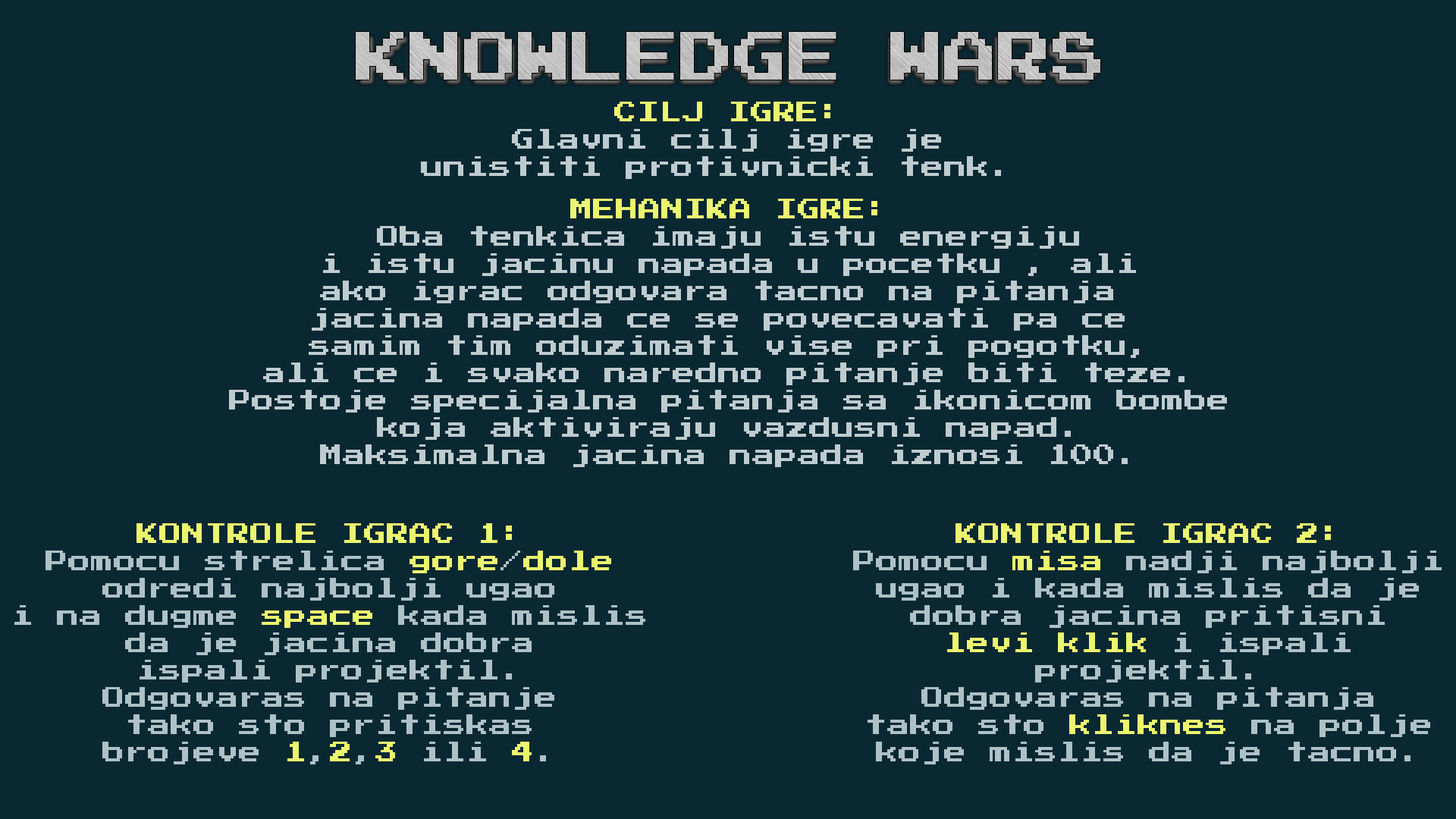
<style>
.page{position:relative;width:1456px;height:819px;background:#0a2832}
.page>*{position:absolute;margin:0}
.t1{font:22.7px "PressStart2P-Regular";color:#beccd0}
.t2{font:22.7px "PressStart2P-Regular";color:#ebf66f}
.t3{font:22.7px "PressStart2P-Regular";color:#adc1c7}
</style>
<div class="page">
<p class="t1" style="left:421px;top:102px;width:580px;height:77px;text-align:center"><span class="t2">CILJ IGRE:<br></span>Glavni cilj igre je<br>unistiti protivnicki tenk.</p>
<p class="t1" style="left:229px;top:199px;width:998px;height:268px;text-align:center"><span class="t2">MEHANIKA IGRE:<br></span>Oba tenkica imaju istu energiju<br>i istu jacinu napada u pocetku , ali<br>ako igrac odgovara tacno na pitanja <br>jacina napada ce se povecavati pa ce <br>samim tim oduzimati vise pri pogotku,<br>ali ce i svako naredno pitanje biti teze.<br>Postoje specijalna pitanja sa ikonicom bombe<br>koja aktiviraju vazdusni napad.<br>Maksimalna jacina napada iznosi 100.</p>
<p class="t3" style="left:14px;top:523px;width:631px;height:241px;text-align:center"><span class="t2">KONTROLE IGRAC 1:<br></span>Pomocu strelica <span class="t2">gore</span>/<span class="t2">dole<br></span>odredi najbolji ugao<br>i na dugme <span class="t2">space</span> kada mislis<br>da je jacina dobra<br>ispali projektil.<br>Odgovaras na pitanje<br>tako sto pritiskas<br>brojeve <span class="t2">1</span>,<span class="t2">2</span>,<span class="t2">3</span> ili <span class="t2">4</span>.</p>
<p class="t3" style="left:853px;top:523px;width:589px;height:241px;text-align:center"><span class="t2">KONTROLE IGRAC 2:<br></span>Pomocu <span class="t2">misa</span> nadji najbolji<br>ugao i kada mislis da je<br>dobra jacina pritisni<br><span class="t2">levi klik</span> i ispali<br>projektil.<br>Odgovaras na pitanja<br>tako sto <span class="t2">kliknes</span> na polje<br>koje mislis da je tacno.</p>
</div>
